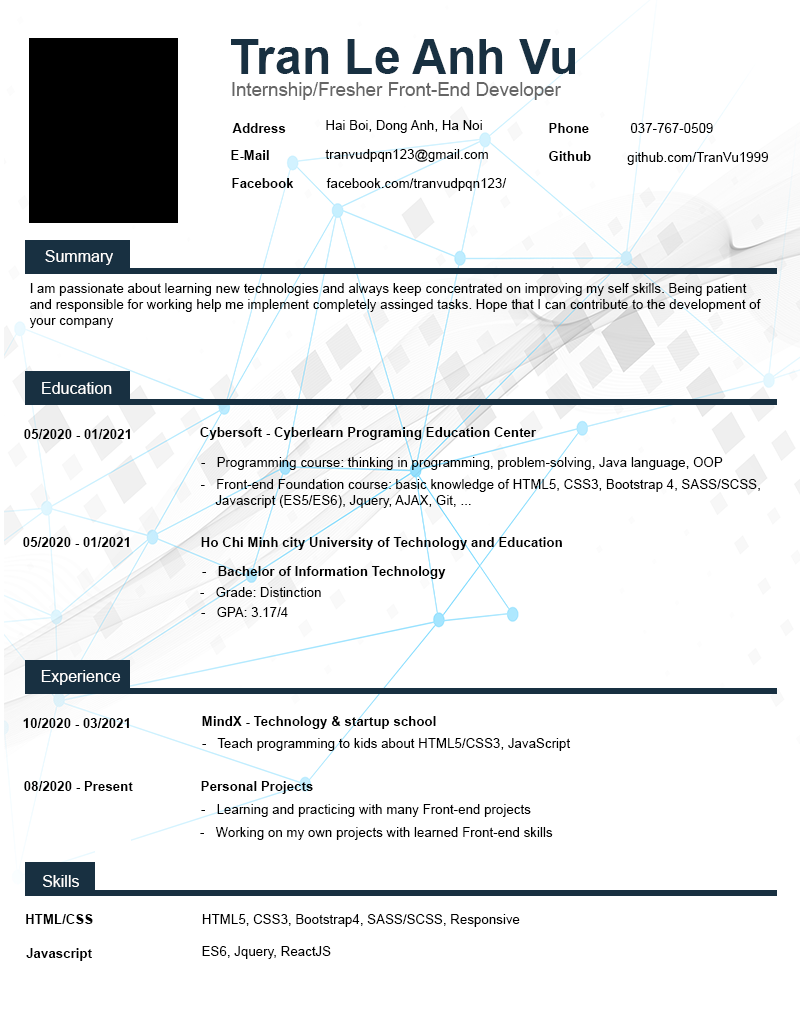
<style>
.page{position:relative;width:800px;height:1024px;background:#ffffff}
.page>*{position:absolute;margin:0}
.t1{font:48px "Arial-BoldMT";color:#183041}
.t2{font:18.7px "ArialMT";color:#666666}
.t3{font:13.3px "Arial-BoldMT";color:#000000}
.t4{font:13.3px "ArialMT";color:#000000}
.t5{font:16px "ArialMT";color:#ffffff}
</style>
<div class="page">
<p class="t1" style="left:231px;top:39px;width:344px;height:35px">Tran Le Anh Vu</p>
<p class="t2" style="left:232px;top:82px;width:329px;height:18px">Internship/Fresher Front-End Developer</p>
<p class="t3" style="left:232px;top:123px;width:54px;height:10px">Address</p>
<p class="t4" style="left:326px;top:120px;width:156px;height:13px">Hai Boi, Dong Anh, Ha Noi</p>
<p class="t3" style="left:549px;top:123px;width:40px;height:10px">Phone</p>
<p class="t4" style="left:630px;top:123px;width:83px;height:10px">037-767-0509</p>
<p class="t3" style="left:231px;top:150px;width:38px;height:10px">E-Mail</p>
<p class="t4" style="left:325px;top:149px;width:163px;height:13px">tranvudpqn123@gmail.com</p>
<p class="t3" style="left:549px;top:151px;width:42px;height:10px">Github</p>
<p class="t4" style="left:627px;top:152px;width:141px;height:13px">github.com/TranVu1999</p>
<p class="t3" style="left:232px;top:178px;width:62px;height:10px">Facebook</p>
<p class="t4" style="left:326px;top:178px;width:181px;height:13px">facebook.com/tranvudpqn123/</p>
<p class="t5" style="left:45px;top:250px;width:68px;height:15px">Summary</p>
<p class="t4" style="left:29px;top:283px;width:732px;height:45px">I am passionate about learning new technologies and always keep concentrated on improving my self skills. Being patient<br>and responsible for working help me implement completely assinged tasks. Hope that I can contribute to the development of<br>your company</p>
<p class="t5" style="left:42px;top:382px;width:70px;height:12px">Education</p>
<p class="t3" style="left:24px;top:429px;width:106px;height:10px">05/2020 - 01/2021</p>
<p class="t3" style="left:200px;top:427px;width:337px;height:13px">Cybersoft - Cyberlearn Programing Education Center</p>
<p class="t4" style="left:201px;top:457px;width:522px;height:13px">-   Programming course: thinking in programming, problem-solving, Java language, OOP</p>
<p class="t4" style="left:201px;top:479px;width:559px;height:29px">-   Front-end Foundation course: basic knowledge of HTML5, CSS3, Bootstrap 4, SASS/SCSS,<br>    Javascript (ES5/ES6), Jquery, AJAX, Git, ...</p>
<p class="t3" style="left:23px;top:537px;width:106px;height:10px">05/2020 - 01/2021</p>
<p class="t3" style="left:201px;top:537px;width:361px;height:13px">Ho Chi Minh city University of Technology and Education</p>
<p class="t3" style="left:202px;top:566px;width:244px;height:13px"><span class="t4">-   </span>Bachelor of Information Technology</p>
<p class="t4" style="left:200px;top:587px;width:121px;height:10px">-   Grade: Distinction</p>
<p class="t4" style="left:201px;top:607px;width:87px;height:10px">-   GPA: 3.17/4</p>
<p class="t5" style="left:41px;top:670px;width:80px;height:15px">Experience</p>
<p class="t3" style="left:23px;top:718px;width:106px;height:10px">10/2020 - 03/2021</p>
<p class="t3" style="left:202px;top:716px;width:234px;height:13px">MindX - Technology &amp; startup school</p>
<p class="t4" style="left:202px;top:738px;width:369px;height:13px">-   Teach programming to kids about HTML5/CSS3, JavaScript</p>
<p class="t3" style="left:24px;top:781px;width:109px;height:10px">08/2020 - Present</p>
<p class="t3" style="left:201px;top:781px;width:112px;height:13px">Personal Projects</p>
<p class="t4" style="left:201px;top:804px;width:330px;height:13px">-   Learning and practicing with many Front-end projects</p>
<p class="t4" style="left:200px;top:827px;width:353px;height:13px">-   Working on my own projects with learned Front-end skills</p>
<p class="t5" style="left:43px;top:875px;width:36px;height:12px">Skills</p>
<p class="t3" style="left:26px;top:914px;width:67px;height:10px">HTML/CSS</p>
<p class="t4" style="left:202px;top:914px;width:318px;height:13px">HTML5, CSS3, Bootstrap4, SASS/SCSS, Responsive</p>
<p class="t3" style="left:26px;top:948px;width:66px;height:13px">Javascript</p>
<p class="t4" style="left:202px;top:946px;width:129px;height:13px">ES6, Jquery, ReactJS</p>
</div>
